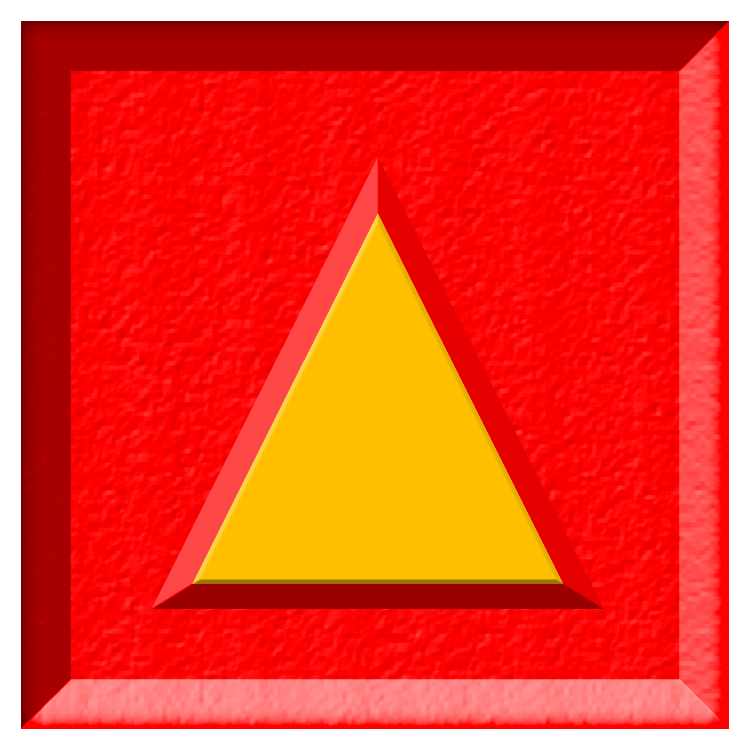
<style>
.page{position:relative;width:750px;height:750px}
.page>*{position:absolute;margin:0}
.t1{font:651.9px "ArialMT"}
</style>
<div class="page">
<p class="t1" style="left:151px;top:157px;width:453px;height:452px">▲</p>
</div>
